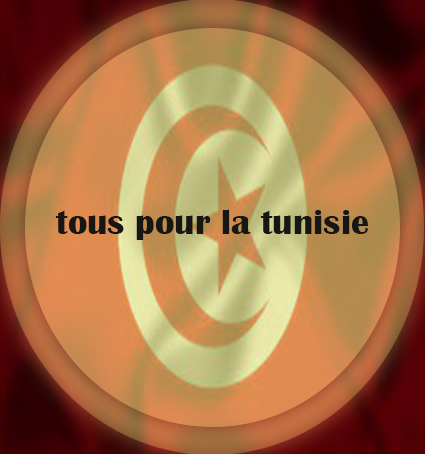
<style>
.page{position:relative;width:425px;height:454px}
.page>*{position:absolute;margin:0}
.t1{font:36px "BritannicBold";color:#161615}
</style>
<div class="page">
<p class="t1" style="left:55px;top:209px;width:313px;height:31px">tous pour la tunisie</p>
</div>
